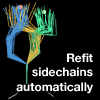
<style>
.page{position:relative;width:100px;height:100px;background:#000000}
.page>*{position:absolute;margin:0}
.t1{font:12px "HelveticaNeue-Bold";color:#ffffff}
</style>
<div class="page">
<p class="t1" style="left:16px;top:53px;width:77px;height:41px;text-align:right">Refit<br>sidechains<br>automatically</p>
</div>
